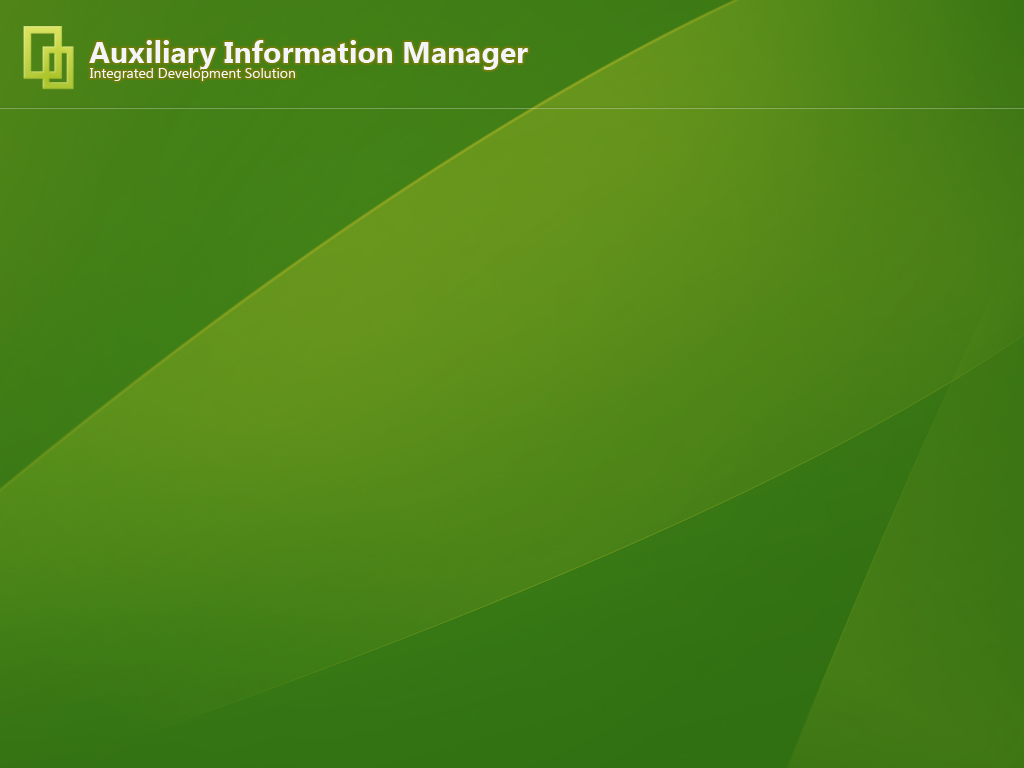
<style>
.page{position:relative;width:1024px;height:768px}
.page>*{position:absolute;margin:0}
.t1{font:30px "SegoeUI-Bold";color:#f4f5f8}
.t2{font:14px "SegoeUI";color:#f4f5f8}
</style>
<div class="page">
<p class="t1" style="left:89px;top:40px;width:439px;height:30px">Auxiliary Information Manager</p>
<p class="t2" style="left:90px;top:68px;width:205px;height:13px">Integrated Development Solution</p>
</div>
